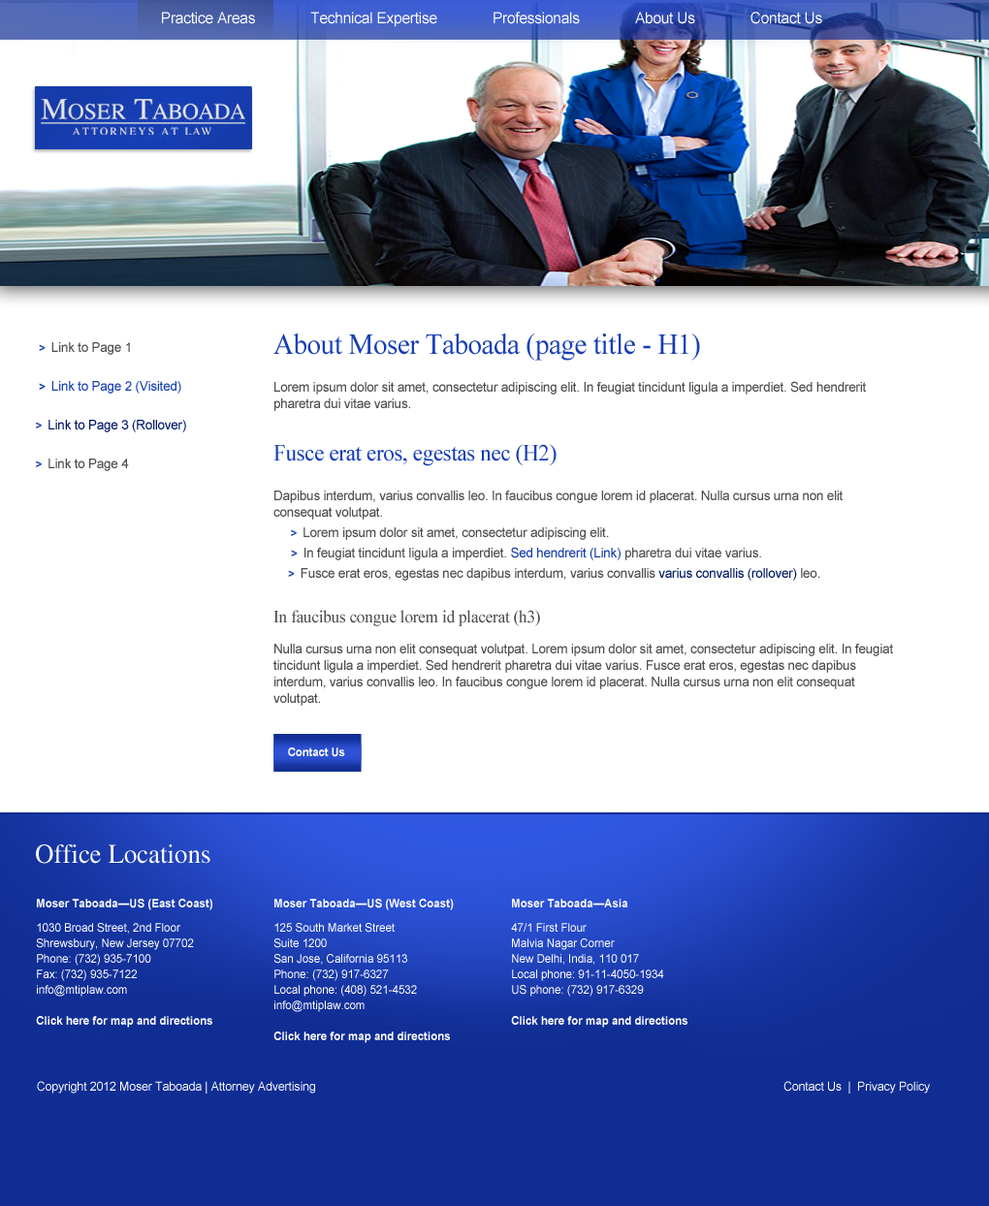
<style>
.page{position:relative;width:989px;height:1206px;background:#ffffff}
.page>*{position:absolute;margin:0}
.t1{font:15.5px "ArialMT";letter-spacing:-0.012em;color:#ffffff;scale:0.96 1}
.t2{font:13.6px "ArialMT";letter-spacing:-0.015em;color:#4c4c4c;scale:0.96 1}
.t3{font:29.1px "TimesNewRomanPSMT";letter-spacing:-0.01em;color:#163eb4;scale:0.96 1}
.t4{font:23.3px "TimesNewRomanPSMT";letter-spacing:-0.015em;color:#163eb5;scale:0.96 1}
.t5{font:11.6px "Arial-BoldMT";letter-spacing:-0.015em;color:#2245bf;scale:0.96 1}
.t6{font:13.6px "ArialMT";letter-spacing:-0.015em;color:#153bab;scale:0.96 1}
.t7{font:13.6px "ArialMT";letter-spacing:-0.015em;color:#011a64;scale:0.96 1}
.t8{font:17.4px "TimesNewRomanPSMT";letter-spacing:-0.015em;color:#4c4c4c;scale:0.96 1}
.t9{font:13.6px/34.9px "ArialMT";letter-spacing:-0.015em;color:#021867;scale:0.96 1}
.t10{font:13.6px/34.9px "ArialMT";letter-spacing:-0.015em;color:#4c4c4c;scale:0.96 1}
.t11{font:11.6px "Arial-BoldMT";letter-spacing:-0.015em;color:#163eb4;scale:0.96 1}
.t12{font:13.6px/34.9px "ArialMT";letter-spacing:-0.015em;color:#163eb4;scale:0.96 1}
.t13{font:11.6px "Arial-BoldMT";letter-spacing:-0.015em;color:#ffffff;scale:0.96 1}
.t14{font:27.1px "Times-Roman";color:#ffffff;scale:0.96 1}
.t15{font:11.6px/11.6px "ArialMT";color:#ffffff;scale:0.96 1}
.t16{font:11.6px/11.6px "Arial-BoldMT";color:#ffffff;scale:0.96 1}
.t17{font:12.6px "ArialMT";letter-spacing:-0.015em;color:#ffffff;scale:0.96 1}
</style>
<div class="page">
<p class="t1" style="left:162px;top:12px;width:660px;height:15px">Practice Areas              Technical Expertise              Professionals              About Us              Contact Us</p>
<p class="t2" style="left:273px;top:333px;width:620px;height:373px"><span class="t3">About Moser Taboada (page title - H1)<br><br></span>Lorem ipsum dolor sit amet, consectetur adipiscing elit. In feugiat tincidunt ligula a imperdiet. Sed hendrerit pharetra dui vitae varius.<br><br><span class="t4">Fusce erat eros, egestas nec (H2)<br></span><br>Dapibus interdum, varius convallis leo. In faucibus congue lorem id placerat. Nulla cursus urna non elit consequat volutpat. <br>     <span class="t5">&gt;  </span>Lorem ipsum dolor sit amet, consectetur adipiscing elit.<br> <span class="t5">     &gt;  </span>In feugiat tincidunt ligula a imperdiet. <span class="t6">Sed hendrerit (Link)</span> pharetra dui vitae varius.<br><span class="t5">     &gt;  </span>Fusce erat eros, egestas nec dapibus interdum, varius convallis <span class="t7">varius convallis (rollover)</span> leo.<br><br><span class="t8">In faucibus congue lorem id placerat (h3)<br><br></span>Nulla cursus urna non elit consequat volutpat. Lorem ipsum dolor sit amet, consectetur adipiscing elit. In feugiat tincidunt ligula a imperdiet. Sed hendrerit pharetra dui vitae varius. Fusce erat eros, egestas nec dapibus interdum, varius convallis leo. In faucibus congue lorem id placerat. Nulla cursus urna non elit consequat volutpat.</p>
<p class="t9" style="left:36px;top:342px;width:150px;height:129px"><span class="t2"> </span><span class="t5">&gt;  </span><span class="t10">Link to Page 1<br> </span><span class="t11">&gt;  </span><span class="t12">Link to Page 2 (Visited)<br></span><span class="t11">&gt;  </span>Link to Page 3 (Rollover)<br><span class="t11">&gt;  </span><span class="t10">Link to Page 4</span></p>
<p class="t13" style="left:288px;top:747px;width:57px;height:10px">Contact Us</p>
<p class="t14" style="left:36px;top:844px;width:174px;height:20px">Office Locations</p>
<p class="t15" style="left:36px;top:899px;width:176px;height:129px"><span class="t16">Moser Taboada—US (East Coast)<br><br></span>1030 Broad Street, 2nd Floor <br>Shrewsbury, New Jersey 07702<br>Phone: (732) 935-7100<br>Fax: (732) 935-7122<br>info@mtiplaw.com<br><br><span class="t16">Click here for map and directions</span></p>
<p class="t15" style="left:273px;top:899px;width:181px;height:144px"><span class="t16">Moser Taboada—US (West Coast)<br><br></span>125 South Market Street<br>Suite 1200<br>San Jose, California 95113<br>Phone: (732) 917-6327<br>Local phone: (408) 521-4532<br>info@mtiplaw.com<br><br><span class="t16">Click here for map and directions</span></p>
<p class="t15" style="left:511px;top:899px;width:176px;height:129px"><span class="t16">Moser Taboada—Asia<br><br></span>47/1 First Flour<br>Malvia Nagar Corner<br>New Delhi, India, 110 017<br>Local phone: 91-11-4050-1934<br>US phone: (732) 917-6329<br><br><span class="t16">Click here for map and directions</span></p>
<p class="t17" style="left:37px;top:1081px;width:278px;height:12px">Copyright 2012 Moser Taboada | Attorney Advertising</p>
<p class="t17" style="left:783px;top:1081px;width:147px;height:12px">Contact Us  |  Privacy Policy</p>
</div>
